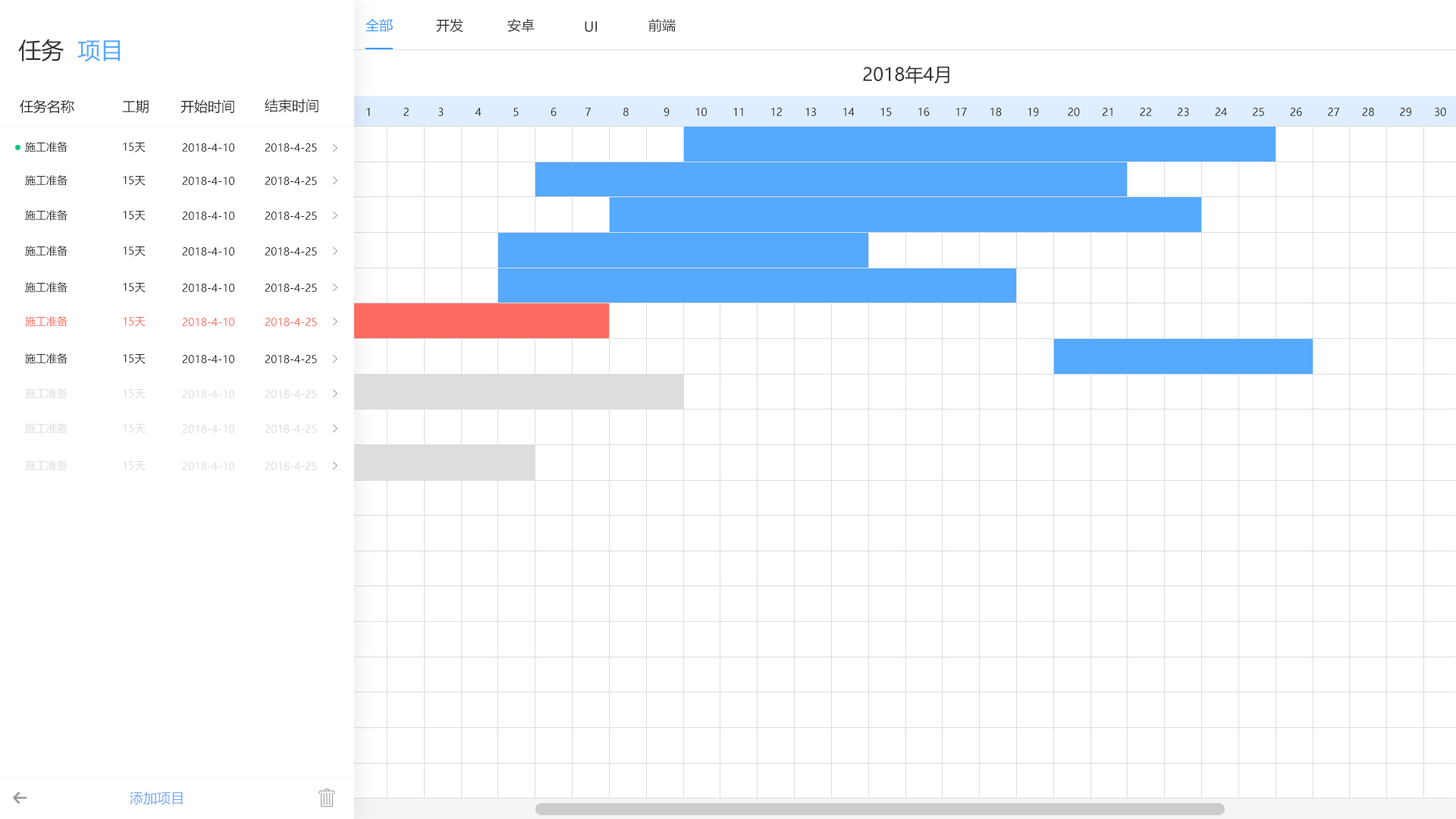
<style>
.page{position:relative;width:1456px;height:819px;background:#ffffff}
.page>*{position:absolute;margin:0}
.t1{font:13.6px "MicrosoftYaHei";color:#399bfe}
.t2{font:13.6px "MicrosoftYaHei";color:#333333}
.t3{font:22.7px "MicrosoftYaHei";color:#333333}
.t4{font:22.7px "MicrosoftYaHei";color:#55a9fe}
.t5{font:18.2px "MicrosoftYaHei";color:#333333}
.t6{font:13.6px "MicrosoftYaHei";color:#282828}
.t7{font:10.6px "MicrosoftYaHei";color:#282828}
.t8{font:10.6px "MicrosoftYaHei";color:#fe6b60}
.t9{font:10.6px "MicrosoftYaHei";color:#dddddd}
.t10{font:13.6px "MicrosoftYaHei";color:#75a8fb}
</style>
<div class="page">
<p class="t1" style="left:366px;top:18px;width:27px;height:14px">全部</p>
<p class="t2" style="left:436px;top:18px;width:27px;height:15px">开发</p>
<p class="t2" style="left:507px;top:18px;width:28px;height:14px">安卓</p>
<p class="t2" style="left:585px;top:21px;width:12px;height:11px">UI</p>
<p class="t2" style="left:648px;top:18px;width:28px;height:14px">前端</p>
<p class="t3" style="left:18px;top:39px;width:46px;height:22px">任务</p>
<p class="t4" style="left:77px;top:40px;width:43px;height:22px">项目</p>
<p class="t5" style="left:863px;top:65px;width:86px;height:19px">2018年4月</p>
<p class="t6" style="left:20px;top:99px;width:54px;height:15px">任务名称</p>
<p class="t6" style="left:122px;top:100px;width:27px;height:14px">工期</p>
<p class="t2" style="left:180px;top:99px;width:54px;height:15px">开始时间</p>
<p class="t2" style="left:265px;top:99px;width:53px;height:13px">结束时间</p>
<p class="t7" style="left:366px;top:108px;width:1080px;height:8px">1          2         3          4          5          6         7          8           9        10        11        12       13        14        15        16        17       18        19         20       21        22        23        24        25        26        27       28        29       30</p>
<p class="t7" style="left:25px;top:141px;width:42px;height:11px">施工准备</p>
<p class="t7" style="left:123px;top:143px;width:23px;height:9px">15天</p>
<p class="t7" style="left:182px;top:143px;width:52px;height:9px">2018-4-10</p>
<p class="t7" style="left:265px;top:143px;width:52px;height:9px">2018-4-25</p>
<p class="t7" style="left:25px;top:174px;width:42px;height:12px">施工准备</p>
<p class="t7" style="left:123px;top:176px;width:23px;height:10px">15天</p>
<p class="t7" style="left:182px;top:177px;width:52px;height:8px">2018-4-10</p>
<p class="t7" style="left:265px;top:177px;width:52px;height:8px">2018-4-25</p>
<p class="t7" style="left:25px;top:209px;width:42px;height:12px">施工准备</p>
<p class="t7" style="left:123px;top:211px;width:23px;height:10px">15天</p>
<p class="t7" style="left:182px;top:212px;width:52px;height:8px">2018-4-10</p>
<p class="t7" style="left:265px;top:212px;width:52px;height:8px">2018-4-25</p>
<p class="t7" style="left:25px;top:245px;width:42px;height:11px">施工准备</p>
<p class="t7" style="left:123px;top:246px;width:23px;height:10px">15天</p>
<p class="t7" style="left:182px;top:247px;width:52px;height:9px">2018-4-10</p>
<p class="t7" style="left:265px;top:247px;width:52px;height:9px">2018-4-25</p>
<p class="t7" style="left:25px;top:281px;width:42px;height:12px">施工准备</p>
<p class="t7" style="left:123px;top:283px;width:23px;height:10px">15天</p>
<p class="t7" style="left:182px;top:284px;width:52px;height:8px">2018-4-10</p>
<p class="t7" style="left:265px;top:284px;width:52px;height:8px">2018-4-25</p>
<p class="t8" style="left:25px;top:315px;width:42px;height:12px">施工准备</p>
<p class="t8" style="left:123px;top:317px;width:23px;height:10px">15天</p>
<p class="t8" style="left:182px;top:318px;width:52px;height:8px">2018-4-10</p>
<p class="t8" style="left:265px;top:318px;width:52px;height:8px">2018-4-25</p>
<p class="t7" style="left:25px;top:353px;width:42px;height:11px">施工准备</p>
<p class="t7" style="left:123px;top:354px;width:23px;height:10px">15天</p>
<p class="t7" style="left:182px;top:355px;width:52px;height:8px">2018-4-10</p>
<p class="t7" style="left:265px;top:355px;width:52px;height:8px">2018-4-25</p>
<p class="t9" style="left:25px;top:388px;width:42px;height:11px">施工准备</p>
<p class="t9" style="left:123px;top:389px;width:23px;height:10px">15天</p>
<p class="t9" style="left:182px;top:390px;width:52px;height:8px">2018-4-10</p>
<p class="t9" style="left:265px;top:390px;width:52px;height:8px">2018-4-25</p>
<p class="t9" style="left:25px;top:422px;width:42px;height:12px">施工准备</p>
<p class="t9" style="left:123px;top:424px;width:23px;height:10px">15天</p>
<p class="t9" style="left:182px;top:425px;width:52px;height:8px">2018-4-10</p>
<p class="t9" style="left:265px;top:425px;width:52px;height:8px">2018-4-25</p>
<p class="t9" style="left:25px;top:460px;width:42px;height:11px">施工准备</p>
<p class="t9" style="left:123px;top:461px;width:23px;height:10px">15天</p>
<p class="t9" style="left:182px;top:462px;width:52px;height:8px">2018-4-10</p>
<p class="t9" style="left:265px;top:462px;width:52px;height:8px">2018-4-25</p>
<p class="t10" style="left:130px;top:792px;width:53px;height:13px">添加项目</p>
</div>
